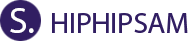
<style>
.page{position:relative;width:189px;height:43px;background:#ffffff}
.page>*{position:absolute;margin:0}
.t1{font:37px "MyriadHebrew-Regular";color:#ffffff}
.t2{font:29.3px "MyriadHebrew-Regular";color:#311e62}
</style>
<div class="page">
<p class="t1" style="left:10px;top:8px;width:24px;height:25px">S.</p>
<p class="t2" style="left:52px;top:13px;width:136px;height:20px">HIPHIPSAM</p>
</div>
